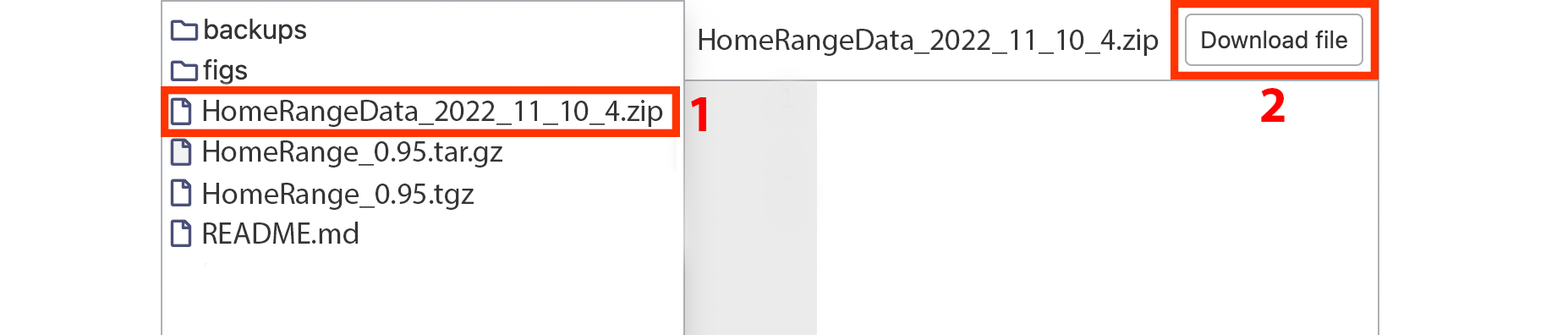
<style>
.page{position:relative;width:1568px;height:335px;background:#ffffff}
.page>*{position:absolute;margin:0}
.t1{font:30.4px "MyriadPro-Regular";color:#353535}
.t2{font:50.7px "MyriadPro-Bold";color:#ff0000}
</style>
<div class="page">
<p class="t1" style="left:699px;top:29px;width:460px;height:27px">HomeRangeData_2022_11_10_4.zip</p>
<p class="t2" style="left:1261px;top:88px;width:24px;height:34px">2</p>
<p class="t1" style="left:203px;top:100px;width:460px;height:27px">HomeRangeData_2022_11_10_4.zip</p>
<p class="t2" style="left:691px;top:97px;width:15px;height:34px">1</p>
<p class="t1" style="left:203px;top:140px;width:299px;height:27px">HomeRange_0.95.tar.gz</p>
<p class="t1" style="left:203px;top:183px;width:271px;height:27px">HomeRange_0.95.tgz</p>
<p class="t1" style="left:203px;top:222px;width:155px;height:22px">README.md</p>
</div>
